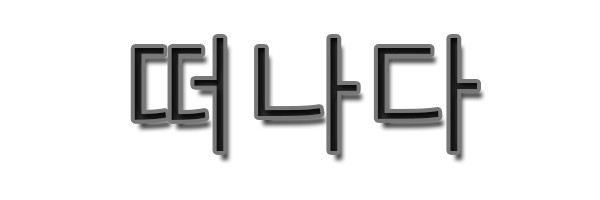
<style>
.page{position:relative;width:600px;height:200px;background:#ffffff}
.page>*{position:absolute;margin:0}
.t1{font:120px "MalgunGothic-Semilight";color:#141414}
</style>
<div class="page">
<p class="t1" style="left:134px;top:38px;width:343px;height:113px">떠나다</p>
</div>
